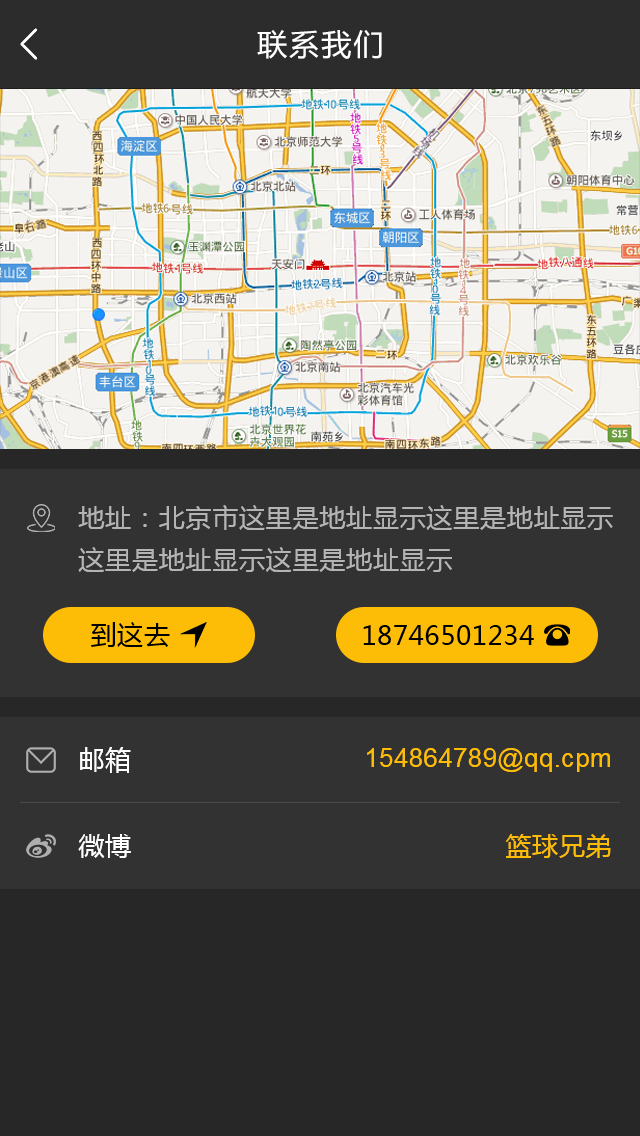
<style>
.page{position:relative;width:640px;height:1136px;background:#323232}
.page>*{position:absolute;margin:0}
.t1{font:30px "MicrosoftYaHei";letter-spacing:0.07em;color:#ffffff}
.t2{font:26px/42px "MicrosoftYaHei";letter-spacing:0.03em;color:#b5b4b4}
.t3{font:26px "MicrosoftYaHei";letter-spacing:0.03em;color:#000000}
.t4{font:26px "MicrosoftYaHei";letter-spacing:0.03em;color:#ffffff}
.t5{font:26px "ArialMT";letter-spacing:0.03em;color:#fdbd06}
.t6{font:26px "MicrosoftYaHei";letter-spacing:0.03em;color:#fdbd06}
</style>
<div class="page">
<p class="t1" style="left:257px;top:30px;width:125px;height:29px">联系我们</p>
<p class="t2" style="left:78px;top:505px;width:535px;height:67px;text-align:justify">地址：北京市这里是地址显示这里是地址显示<br>这里是地址显示这里是地址显示</p>
<p class="t3" style="left:91px;top:622px;width:79px;height:25px">到这去</p>
<p class="t3" style="left:363px;top:625px;width:171px;height:20px">18746501234</p>
<p class="t4" style="left:80px;top:747px;width:51px;height:26px">邮箱</p>
<p class="t5" style="left:367px;top:748px;width:243px;height:24px">154864789@qq.cpm</p>
<p class="t4" style="left:78px;top:834px;width:53px;height:24px">微博</p>
<p class="t6" style="left:505px;top:834px;width:106px;height:24px">篮球兄弟</p>
</div>
